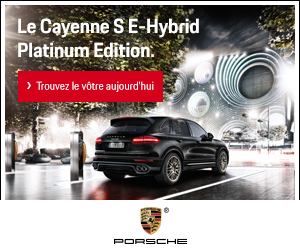
<style>
.page{position:relative;width:300px;height:250px;background:#ffffff}
.page>*{position:absolute;margin:0}
.t1{font:20px/24px "PorscheNext-Bold";color:#ffffff}
.t2{font:11px "PorscheNext-Regular";color:#ffffff}
</style>
<div class="page">
<p class="t1" style="left:18px;top:18px;width:181px;height:40px">Le Cayenne S E-Hybrid <br>Platinum Edition.</p>
<p class="t2" style="left:36px;top:81px;width:118px;height:11px">Trouvez le vôtre aujourd’hui</p>
</div>
